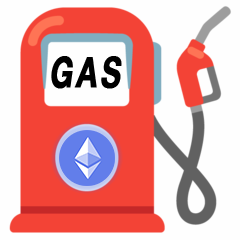
<style>
.page{position:relative;width:240px;height:240px;background:#fefefe}
.page>*{position:absolute;margin:0}
.t1{font:42.5px "HelveticaNeue-Bold";letter-spacing:0.1em;color:#000000;text-transform:uppercase;font-weight:bold;font-style:italic;scale:0.7 1}
</style>
<div class="page">
<p class="t1" style="left:51px;top:56px;width:71px;height:33px">gas</p>
</div>
